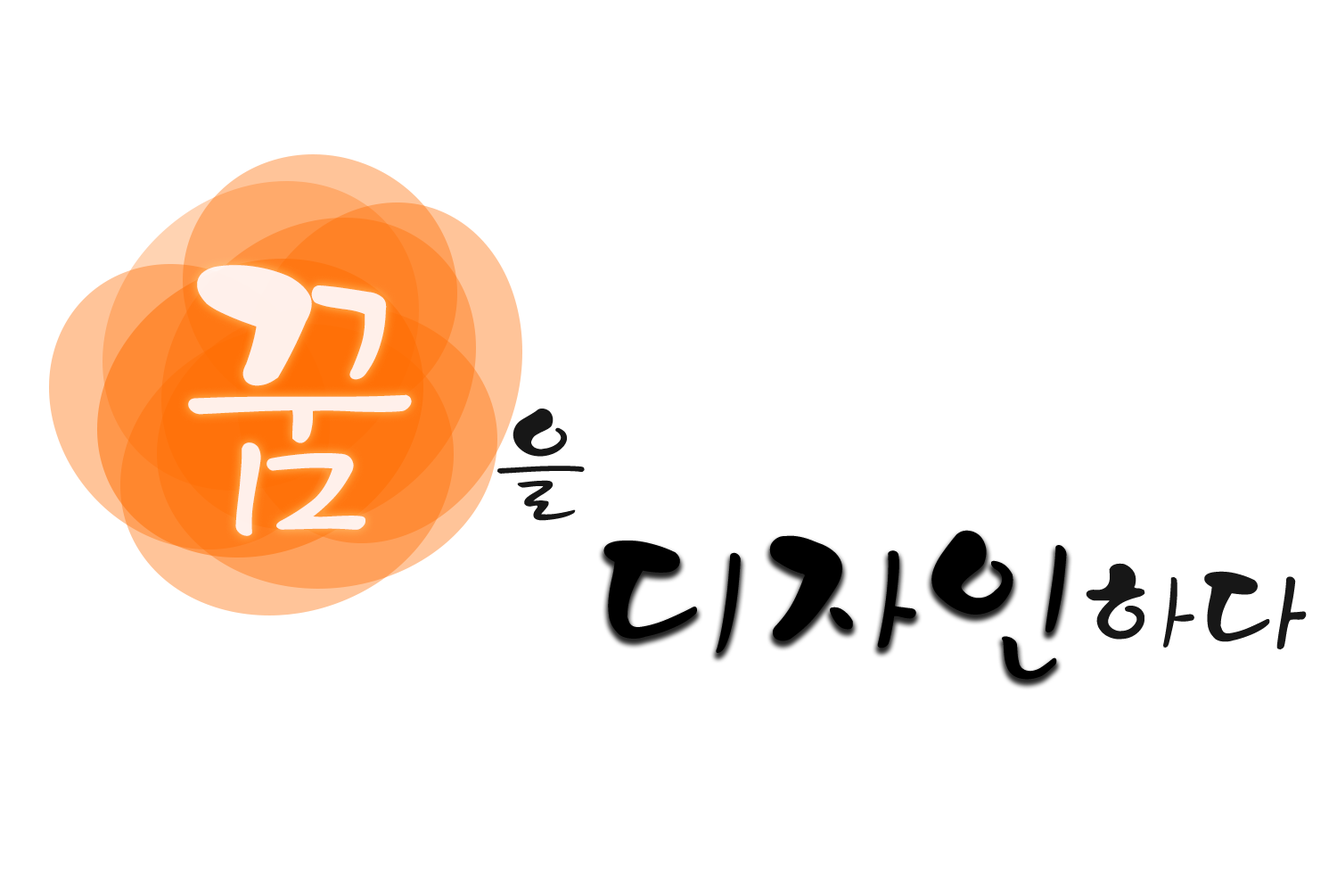
<style>
.page{position:relative;width:1337px;height:892px;background:#ffffff}
.page>*{position:absolute;margin:0}
.t1{font:302.7px "Yj-DOOLGI-Medium";letter-spacing:-0.05em;color:#ffffff}
.t2{font:121.1px "Yj-DOOLGI-Medium";letter-spacing:-0.05em;color:#171717}
.t3{font:171.5px "Yj-DOOLGI-Medium";letter-spacing:-0.05em;color:#000000}
</style>
<div class="page">
<p class="t1" style="left:188px;top:265px;width:224px;height:271px;opacity:0.87">꿈</p>
<p class="t2" style="left:498px;top:408px;width:87px;height:113px">을</p>
<p class="t3" style="left:604px;top:530px;width:463px;height:149px">디자인</p>
<p class="t2" style="left:1086px;top:563px;width:221px;height:87px">하다</p>
</div>
